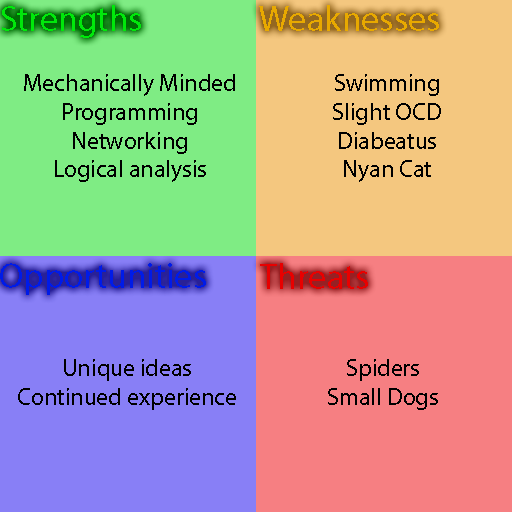
<style>
.page{position:relative;width:512px;height:512px;background:#f67f82}
.page>*{position:absolute;margin:0}
.t1{font:36px "MyriadPro-Regular";color:#00e80b}
.t2{font:36px "MyriadPro-Regular";color:#e8a900}
.t3{font:24px "MyriadPro-Regular";color:#000000}
.t4{font:36px "MyriadPro-Regular";color:#001be8}
.t5{font:36px "MyriadPro-Regular";color:#e80000}
</style>
<div class="page">
<p class="t1" style="left:2px;top:5px;width:139px;height:33px">Strengths</p>
<p class="t2" style="left:259px;top:5px;width:180px;height:26px">Weaknesses</p>
<p class="t3" style="left:24px;top:74px;width:211px;height:108px;text-align:center">Mechanically Minded<br>Programming<br>Networking<br>Logical analysis</p>
<p class="t3" style="left:333px;top:74px;width:108px;height:108px;text-align:center">Swimming<br>Slight OCD<br>Diabeatus<br>Nyan Cat</p>
<p class="t4" style="left:0px;top:263px;width:206px;height:32px">Opportunities</p>
<p class="t5" style="left:260px;top:263px;width:108px;height:26px">Threats</p>
<p class="t3" style="left:18px;top:359px;width:218px;height:51px;text-align:center">Unique ideas<br>Continued experience</p>
<p class="t3" style="left:328px;top:359px;width:110px;height:51px;text-align:center">Spiders<br>Small Dogs</p>
</div>
